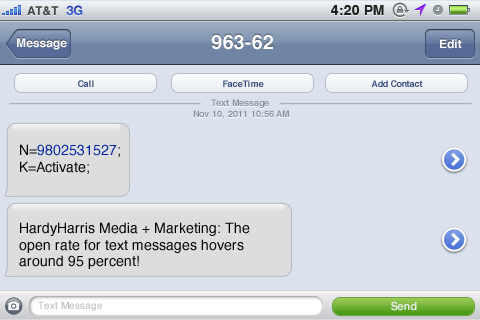
<style>
.page{position:relative;width:480px;height:320px;background:#dbe2ed}
.page>*{position:absolute;margin:0}
.t1{font:12px "Helvetica-Bold";color:#424242;text-transform:uppercase}
.t2{font:13px "HelveticaNeue-Bold";color:#3255c1;text-transform:uppercase}
.t3{font:14px "Helvetica-Bold";color:#202121;text-transform:uppercase}
.t4{font:12px "Helvetica-Bold";color:#ffffff}
.t5{font:20px "Helvetica-Bold";color:#ffffff}
.t6{font:9px "Helvetica-Bold";color:#3b507a}
.t7{font:9px "Helvetica-Bold";color:#8892a5}
.t8{font:9px "Helvetica-Bold"}
.t9{font:14px "Helvetica";color:#010101}
.t10{font:14px "Helvetica";color:#0022a3}
.t11{font:10px "Helvetica";color:#bbbbbb}
.t12{font:11px "Helvetica-Bold";color:#e9e9e9}
</style>
<div class="page">
<p class="t1" style="left:27px;top:6px;width:32px;height:10px">AT&amp;T</p>
<p class="t2" style="left:66px;top:5px;width:17px;height:11px">3G</p>
<p class="t3" style="left:331px;top:5px;width:53px;height:10px">4:20 PM</p>
<p class="t4" style="left:17px;top:38px;width:50px;height:12px">Message</p>
<p class="t5" style="left:211px;top:34px;width:62px;height:16px">963-62</p>
<p class="t4" style="left:440px;top:39px;width:22px;height:10px">Edit</p>
<p class="t6" style="left:78px;top:80px;width:16px;height:7px">Call</p>
<p class="t6" style="left:223px;top:80px;width:41px;height:7px">FaceTime</p>
<p class="t6" style="left:371px;top:80px;width:52px;height:7px">Add Contact</p>
<p class="t7" style="left:211px;top:99px;width:58px;height:9px">Text Message</p>
<p class="t8" style="left:193px;top:111px;width:96px;height:9px">Nov 10, 2011 10:56 AM</p>
<p class="t7" style="left:193px;top:110px;width:96px;height:9px">Nov 10, 2011 10:56 AM</p>
<p class="t9" style="left:20px;top:144px;width:100px;height:30px">N=<span class="t10">9802531527</span>;<br>K=Activate;</p>
<p class="t9" style="left:19px;top:222px;width:231px;height:47px">HardyHarris Media + Marketing: The open rate for text messages hovers around 95 percent!<br><span class="t10">http://bit.ly/tWpuuM</span> Reply STOP to cancel</p>
<p class="t11" style="left:38px;top:301px;width:64px;height:10px">Text Message</p>
<p class="t12" style="left:391px;top:301px;width:26px;height:10px">Send</p>
</div>
